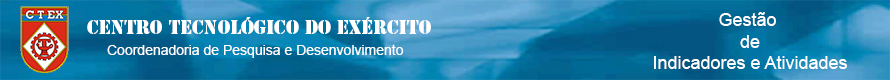
<style>
.page{position:relative;width:890px;height:80px}
.page>*{position:absolute;margin:0}
.t1{font:18px "StencilStd";color:#ffffff}
.t2{font:18px "ArialMT";color:#ffffff}
.t3{font:14px "ArialMT";color:#ffffff}
</style>
<div class="page">
<p class="t1" style="left:87px;top:17px;width:344px;height:17px">Centro Tecnológico do Exército</p>
<p class="t2" style="left:654px;top:12px;width:193px;height:57px;text-align:center">Gestão <br>de<br>Indicadores e Atividades</p>
<p class="t3" style="left:107px;top:44px;width:297px;height:14px">Coordenadoria de Pesquisa e Desenvolvimento</p>
</div>
